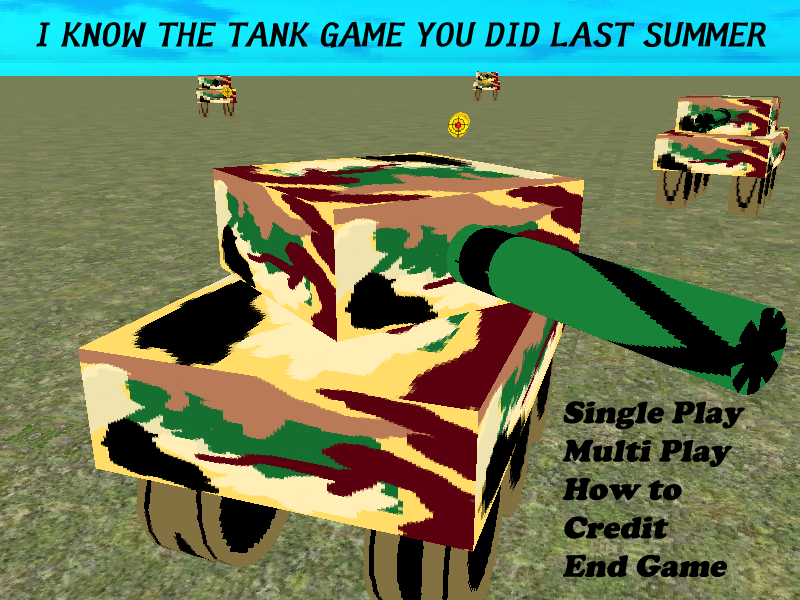
<style>
.page{position:relative;width:800px;height:600px}
.page>*{position:absolute;margin:0}
.t1{font:32px "HYsanB";color:#000000;font-style:italic}
.t2{font:32px "CooperBlack";color:#000000;font-style:italic}
</style>
<div class="page">
<p class="t1" style="left:36px;top:21px;width:730px;height:27px">I KNOW THE TANK GAME YOU DID LAST SUMMER</p>
<p class="t2" style="left:562px;top:401px;width:183px;height:177px">Single Play<br>Multi Play<br>How to<br>Credit<br>End Game</p>
</div>
